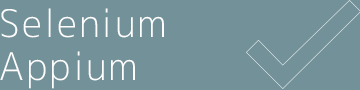
<style>
.page{position:relative;width:360px;height:90px;background:#739199}
.page>*{position:absolute;margin:0}
.t1{font:38px/43px "mplus-1c-light";letter-spacing:0.05em;color:#ffffff}
</style>
<div class="page">
<p class="t1" style="left:0px;top:8px;width:164px;height:81px">Selenium<br>Appium</p>
</div>
